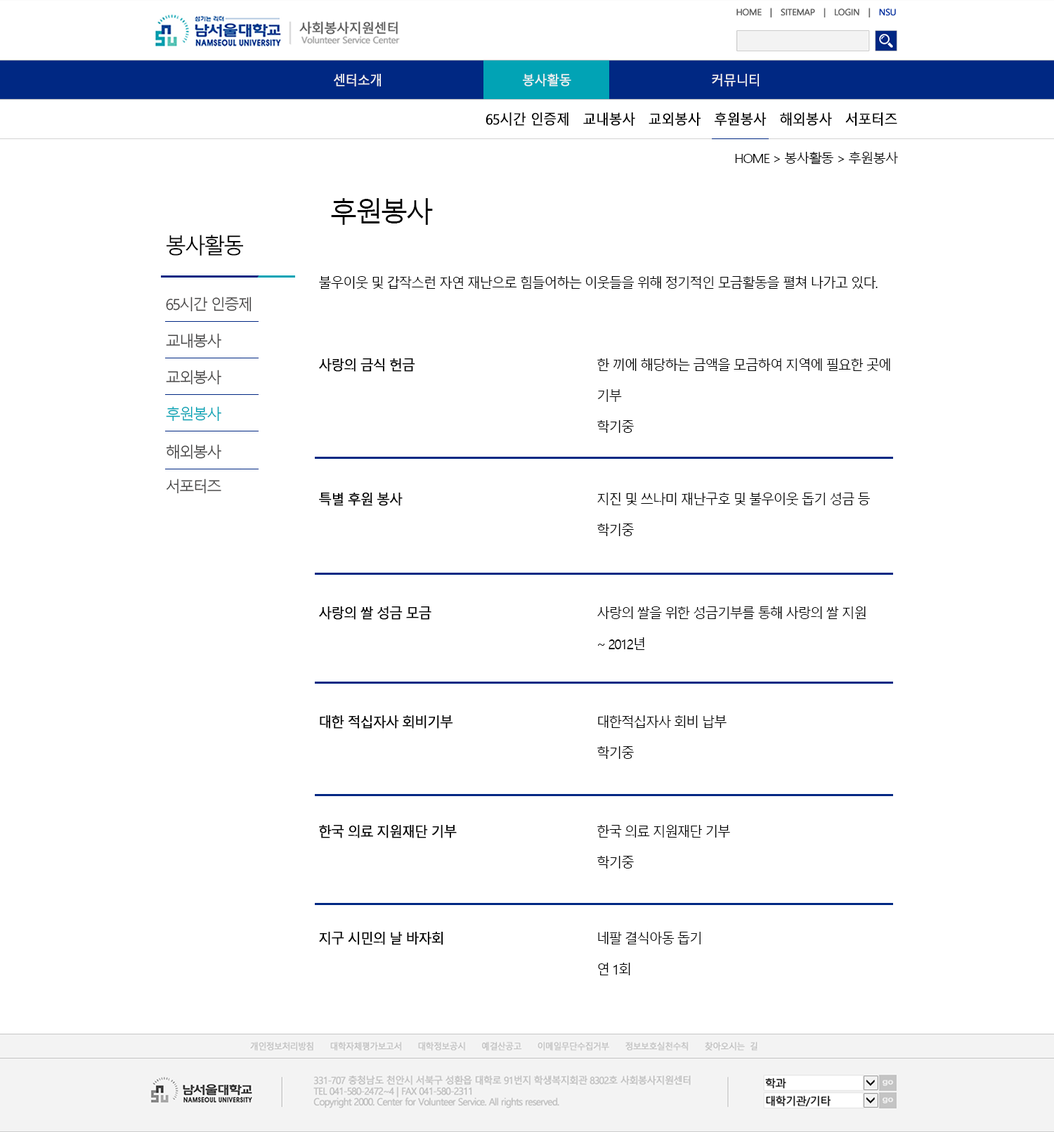
<style>
.page{position:relative;width:1054px;height:1132px;background:#ffffff}
.page>*{position:absolute;margin:0}
.t1{font:13.2px "MalgunGothicRegular";letter-spacing:-0.05em;color:#f3f3f3;font-weight:bold;scale:0.95 1}
.t2{font:14px "MalgunGothicRegular";letter-spacing:-0.05em;color:#000000;font-weight:bold;scale:0.95 1}
.t3{font:13px "MalgunGothicRegular";letter-spacing:-0.1em;color:#000000;scale:1.05 1}
.t4{font:28.1px "MalgunGothicRegular";letter-spacing:-0.1em;color:#000000}
.t5{font:21.8px "MalgunGothicRegular";letter-spacing:-0.1em;color:#000000}
.t6{font:14.4px "MalgunGothicRegular";letter-spacing:-0.1em;color:#000000;scale:0.95 1}
.t7{font:15.1px "MalgunGothicRegular";letter-spacing:-0.1em;color:#454444}
.t8{font:14.4px/30.9px "MalgunGothicRegular";letter-spacing:-0.1em;color:#000000;scale:0.95 1}
.t9{font:14.4px/30.9px "MalgunGothicRegular";letter-spacing:-0.1em;color:#000000;font-weight:bold;scale:0.95 1}
.t10{font:15.1px "MalgunGothicRegular";letter-spacing:-0.1em;color:#01a3b5}
</style>
<div class="page">
<p class="t1" style="left:334px;top:73px;width:425px;height:13px">센터소개        봉사활동       커뮤니티</p>
<p class="t2" style="left:485px;top:112px;width:412px;height:14px">65시간 인증제　교내봉사　교외봉사　후원봉사　해외봉사　서포터즈</p>
<p class="t3" style="left:735px;top:152px;width:163px;height:12px">HOME &gt; 봉사활동 &gt; 후원봉사</p>
<p class="t4" style="left:331px;top:198px;width:102px;height:27px">후원봉사</p>
<p class="t5" style="left:166px;top:235px;width:77px;height:21px">봉사활동</p>
<p class="t6" style="left:319px;top:276px;width:558px;height:13px">불우이웃 및 갑작스런 자연 재난으로 힘들어하는 이웃들을 위해 정기적인 모금활동을 펼쳐 나가고 있다.</p>
<p class="t7" style="left:166px;top:296px;width:85px;height:16px">65시간 인증제</p>
<p class="t7" style="left:166px;top:333px;width:55px;height:15px">교내봉사</p>
<p class="t8" style="left:319px;top:358px;width:571px;height:75px"><span class="t9">사랑의 금식 헌금</span>         한 끼에 해당하는 금액을 모금하여 지역에 필요한 곳에 <br>           기부<br>      　     학기중</p>
<p class="t7" style="left:166px;top:369px;width:55px;height:16px">교외봉사</p>
<p class="t10" style="left:166px;top:406px;width:55px;height:15px">후원봉사</p>
<p class="t7" style="left:166px;top:444px;width:55px;height:15px">해외봉사</p>
<p class="t7" style="left:166px;top:478px;width:55px;height:16px">서포터즈</p>
<p class="t8" style="left:319px;top:492px;width:551px;height:44px"><span class="t9">특별 후원 봉사       　  </span>지진 및 쓰나미 재난구호 및 불우이웃 돕기 성금 등<br>      　     학기중</p>
<p class="t8" style="left:319px;top:606px;width:546px;height:44px"><span class="t9">사랑의 쌀 성금 모금        </span>사랑의 쌀을 위한 성금기부를 통해 사랑의 쌀 지원<br>           ~ 2012년</p>
<p class="t8" style="left:320px;top:715px;width:406px;height:44px"><span class="t9">대한 적십자사 회비기부       </span>대한적십자사 회비 납부<br>           학기중</p>
<p class="t8" style="left:319px;top:825px;width:411px;height:43px"><span class="t9">한국 의료 지원재단 기부       </span>한국 의료 지원재단 기부<br>           학기중</p>
<p class="t8" style="left:319px;top:931px;width:381px;height:44px"><span class="t9">지구 시민의 날 바자회       </span>네팔 결식아동 돕기<br>           연 1회</p>
</div>
